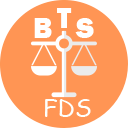
<style>
.page{position:relative;width:128px;height:128px;background:#ff9554}
.page>*{position:absolute;margin:0}
.t1{font:30px "FranklinGothic-Heavy";color:#ffffff}
.t2{font:24px "ComicSansMS";color:#fdfffd}
</style>
<div class="page">
<p class="t1" style="left:57px;top:8px;width:15px;height:20px">T</p>
<p class="t1" style="left:34px;top:18px;width:18px;height:20px">B</p>
<p class="t1" style="left:75px;top:18px;width:19px;height:20px">S</p>
<p class="t2" style="left:45px;top:99px;width:46px;height:18px">FDS</p>
</div>
